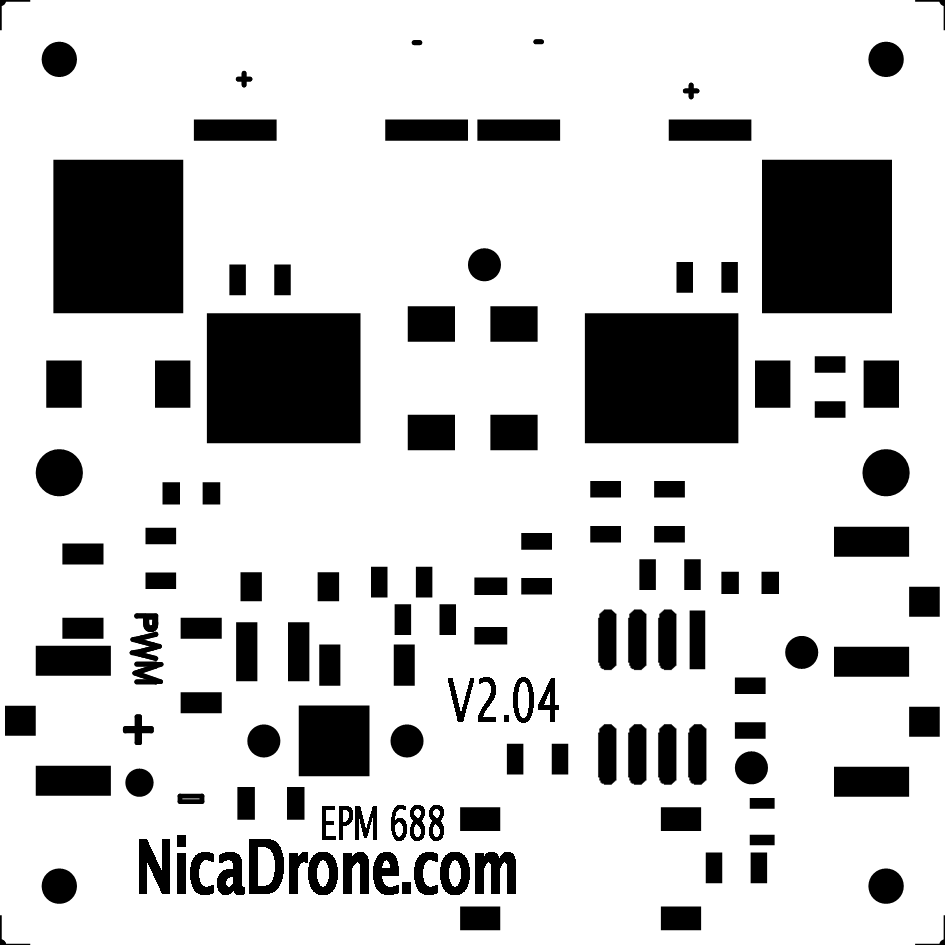
<style>
.page{position:relative;width:945px;height:945px;background:#ffffff}
.page>*{position:absolute;margin:0}
.t1{font:60px "LucidaSans";letter-spacing:-0.03em;color:#000000;font-weight:bold;scale:0.67 1}
.t2{font:45px "LucidaSans";letter-spacing:-0.03em;color:#000000;font-weight:bold;scale:0.67 1}
.t3{font:75px "LucidaSans-Demi";letter-spacing:-0.03em;color:#000000;font-weight:bold;scale:0.67 1}
</style>
<div class="page">
<p class="t1" style="left:448px;top:677px;width:111px;height:46px">V2.04</p>
<p class="t2" style="left:322px;top:805px;width:122px;height:36px">EPM 688</p>
<p class="t3" style="left:139px;top:835px;width:377px;height:60px">NicaDrone.com</p>
</div>
